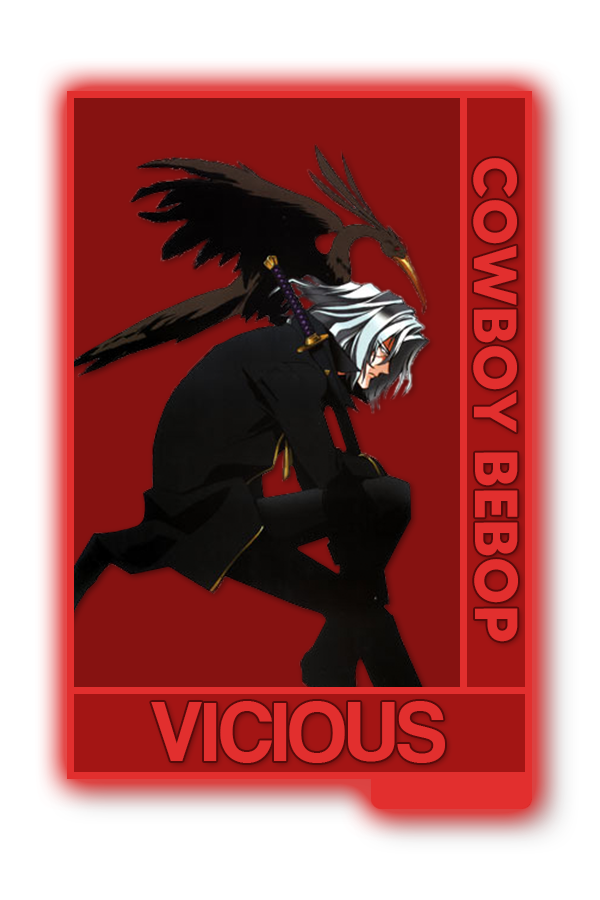
<style>
.page{position:relative;width:600px;height:900px;background:#ffffff}
.page>*{position:absolute;margin:0}
.t1{font:60.5px "MADETOMMY-Bold";color:#e22f2e}
.t2{font:86.6px "CoolveticaRg-Regular";color:#e22f2e}
</style>
<div class="page">
<p class="t1" style="left:473px;top:158px;width:45px;height:484px;rotate:90deg">COWBOY BEBOP</p>
<p class="t2" style="left:151px;top:701px;width:294px;height:62px">VICIOUS</p>
</div>
